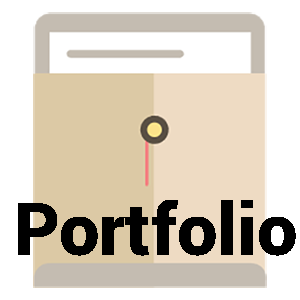
<style>
.page{position:relative;width:300px;height:300px;background:#ffffff}
.page>*{position:absolute;margin:0}
.t1{font:72px "Roboto-Black";color:#000000}
</style>
<div class="page">
<p class="t1" style="left:18px;top:200px;width:278px;height:56px">Portfolio</p>
</div>
